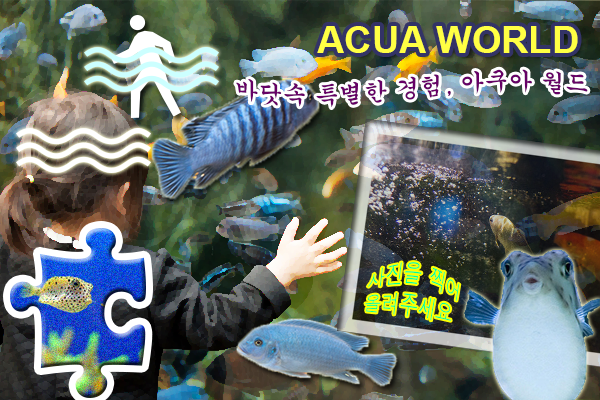
<style>
.page{position:relative;width:600px;height:400px}
.page>*{position:absolute;margin:0}
.t1{font:38.1px "Arial-BoldMT";color:#ffff44}
.t2{font:23.7px "Gungsuh";color:#660066}
.t3{font:17.8px "Dotum";color:#00ff99}
</style>
<div class="page">
<p class="t1" style="left:317px;top:26px;width:261px;height:27px">ACUA WORLD</p>
<p class="t2" style="left:236px;top:69px;width:352px;height:39px">바닷속 특별한 경험, 아쿠아 월드</p>
<p class="t3" style="left:365px;top:262px;width:95px;height:59px;rotate:9deg">사진을 찍어<br>올려주세요</p>
</div>
